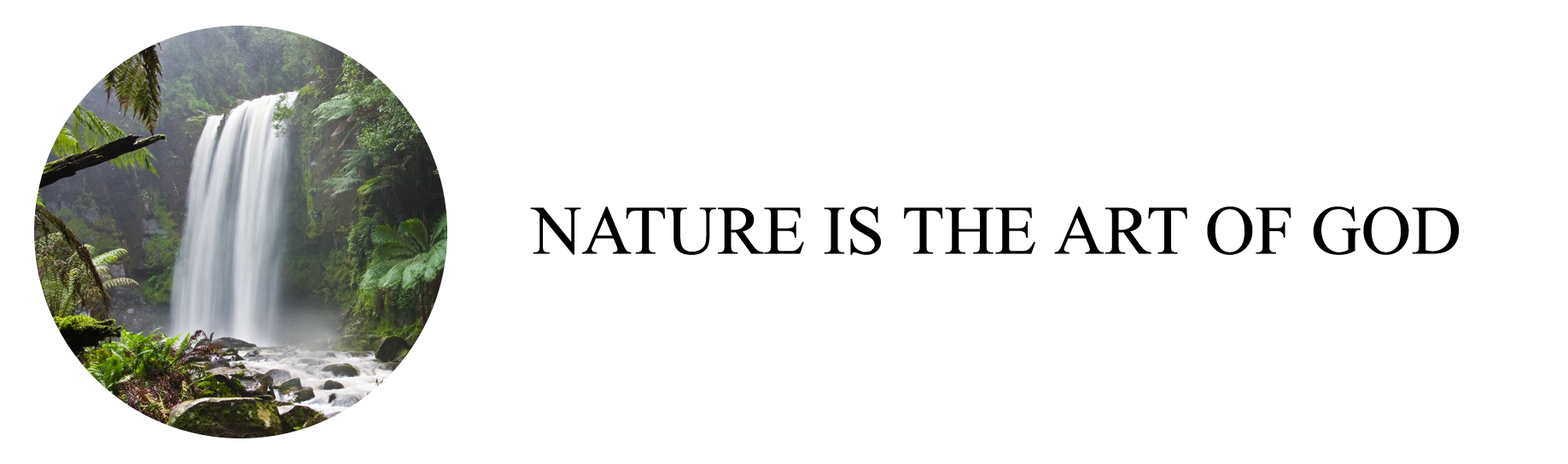
<style>
.page{position:relative;width:1568px;height:464px;background:#ffffff}
.page>*{position:absolute;margin:0}
.t1{font:69.4px "IskoolaPota";color:#000000}
</style>
<div class="page">
<p class="t1" style="left:530px;top:207px;width:930px;height:48px">NATURE IS THE ART OF GOD</p>
</div>
